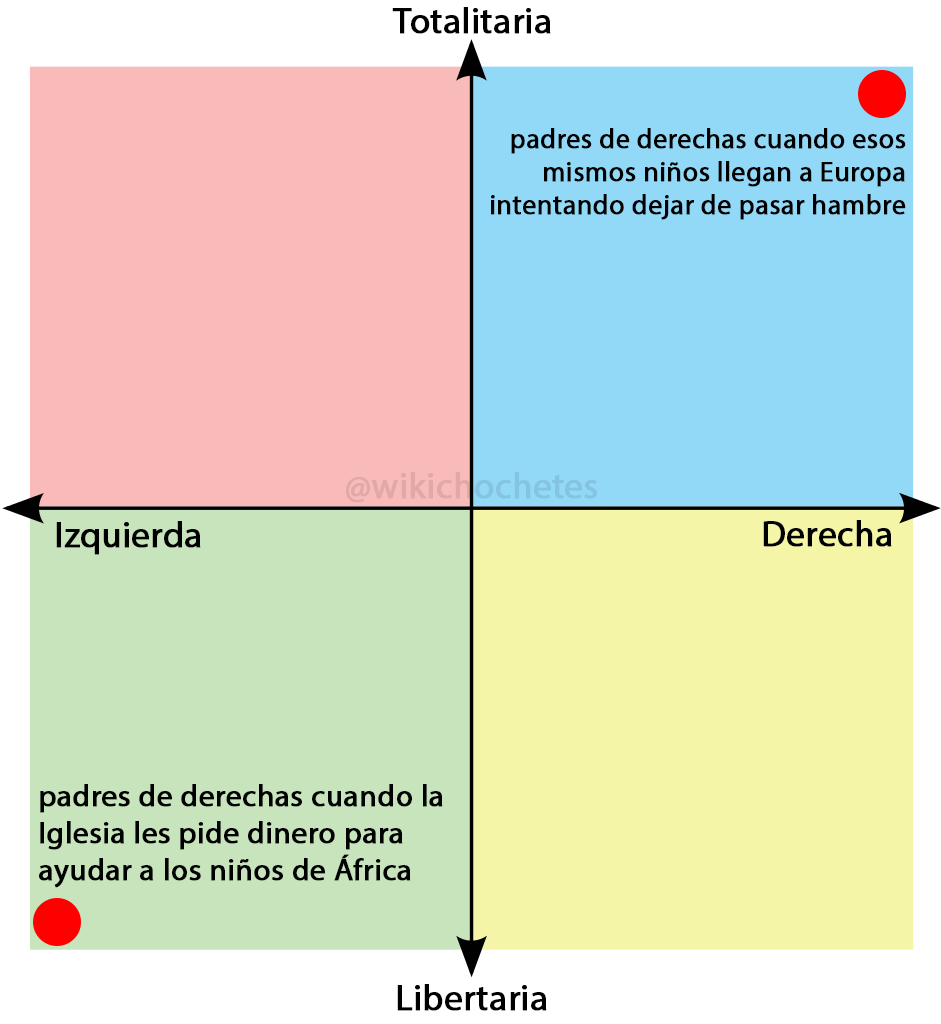
<style>
.page{position:relative;width:941px;height:1024px;background:#f9baba}
.page>*{position:absolute;margin:0}
.t1{font:36px "MyriadPro-Regular";color:#000000;font-weight:bold}
.t2{font:27.7px "MyriadPro-Regular";color:#000000;font-weight:bold}
.t3{font:31px "MyriadPro-Regular";color:#000000;font-weight:bold}
</style>
<div class="page">
<p class="t1" style="left:392px;top:7px;width:159px;height:27px">Totalitaria</p>
<p class="t2" style="left:491px;top:128px;width:415px;height:92px;text-align:right">padres de derechas cuando esos<br>mismos niños llegan a Europa<br>intentando dejar de pasar hambre</p>
<p class="t1" style="left:56px;top:521px;width:145px;height:34px">Izquierda</p>
<p class="t1" style="left:763px;top:520px;width:129px;height:27px">Derecha</p>
<p class="t3" style="left:39px;top:784px;width:404px;height:104px">padres de derechas cuando la<br>Iglesia les pide dinero para<br>ayudar a los niños de África</p>
<p class="t1" style="left:397px;top:984px;width:150px;height:27px">Libertaria</p>
</div>
